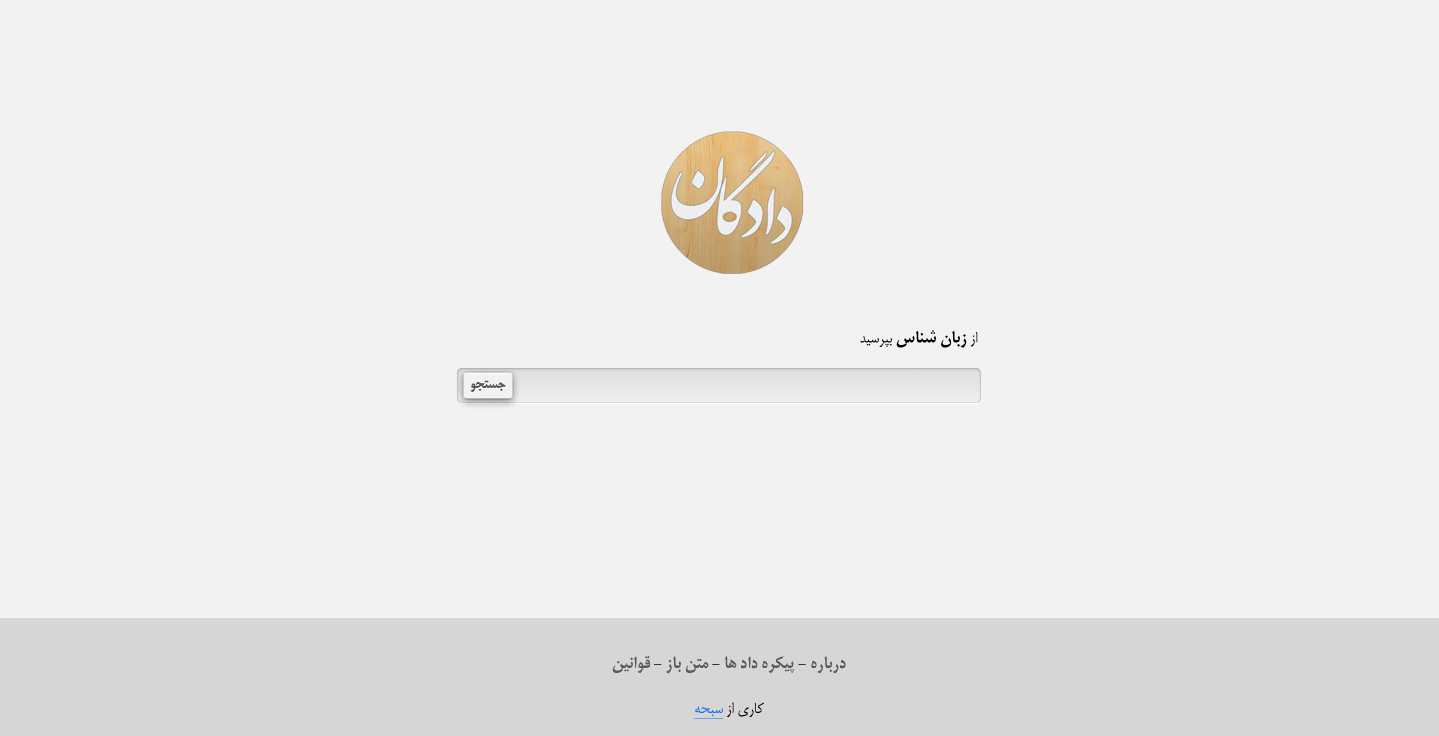
<style>
.page{position:relative;width:1439px;height:736px;background:#f2f2f2}
.page>*{position:absolute;margin:0}
.t1{font:18px "F_mitra-Bold";color:#000000}
.t2{font:18px "F_mitra";color:#000000}
.t3{font:18px "F_mitra-Bold";color:#565a5d}
.t4{font:18px "F_mitra";color:#006cfe;text-decoration:underline}
</style>
<div class="page">
<p class="t1" style="left:860px;top:330px;width:118px;height:18px"><span class="t2">kÃwoPM </span>tI¹{ ·IMp <span class="t2">pH</span></p>
<p class="t3" style="left:612px;top:656px;width:234px;height:18px">¸ÃºH¼¤<span class="t1"> - </span>pIM ¸T¶ <span class="t1">- </span>IÀ jHj ½o§ÃQ<span class="t1"> - </span>½nIMnj</p>
<p class="t2" style="left:694px;top:702px;width:71px;height:17px"><span class="t4">¾dLw </span>pH ÁnI¨</p>
</div>
